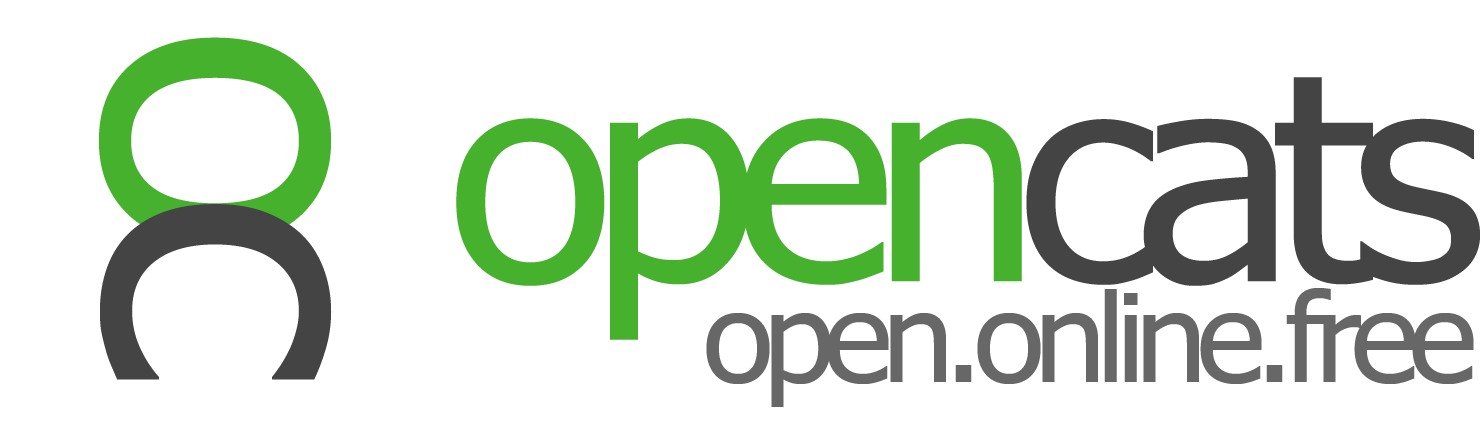
<style>
.page{position:relative;width:1484px;height:428px;background:#ffffff}
.page>*{position:absolute;margin:0}
.t1{font:290.2px "Tahoma";letter-spacing:-0.075em;color:#46b12d;scale:1.05 1}
.t2{font:290.2px "Tahoma";letter-spacing:-0.075em;color:#444444;scale:1.05 1}
.t3{font:122.9px "Tahoma";letter-spacing:-0.075em;color:#676767;scale:1.05 1}
</style>
<div class="page">
<p class="t1" style="left:456px;top:77px;width:1024px;height:263px">open<span class="t2">cats</span></p>
<p class="t3" style="left:706px;top:288px;width:768px;height:119px">open.online.free</p>
</div>
